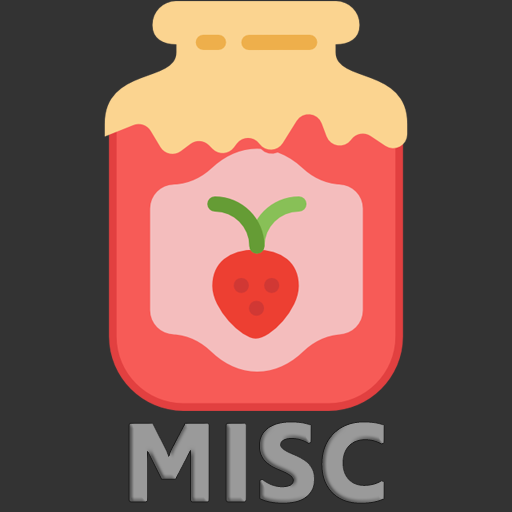
<style>
.page{position:relative;width:512px;height:512px;background:#333333}
.page>*{position:absolute;margin:0}
.t1{font:108px "Leelawadee-Bold";color:#9a9a9a;font-weight:bold}
</style>
<div class="page">
<p class="t1" style="left:129px;top:422px;width:255px;height:82px">MISC</p>
</div>
